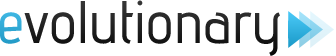
<style>
.page{position:relative;width:336px;height:56px;background:#ffffff}
.page>*{position:absolute;margin:0}
.t1{font:60px "adventpro-Bd1";color:#222222}
</style>
<div class="page">
<p class="t1" style="left:0px;top:0px;width:280px;height:56px">evolutionary</p>
</div>
